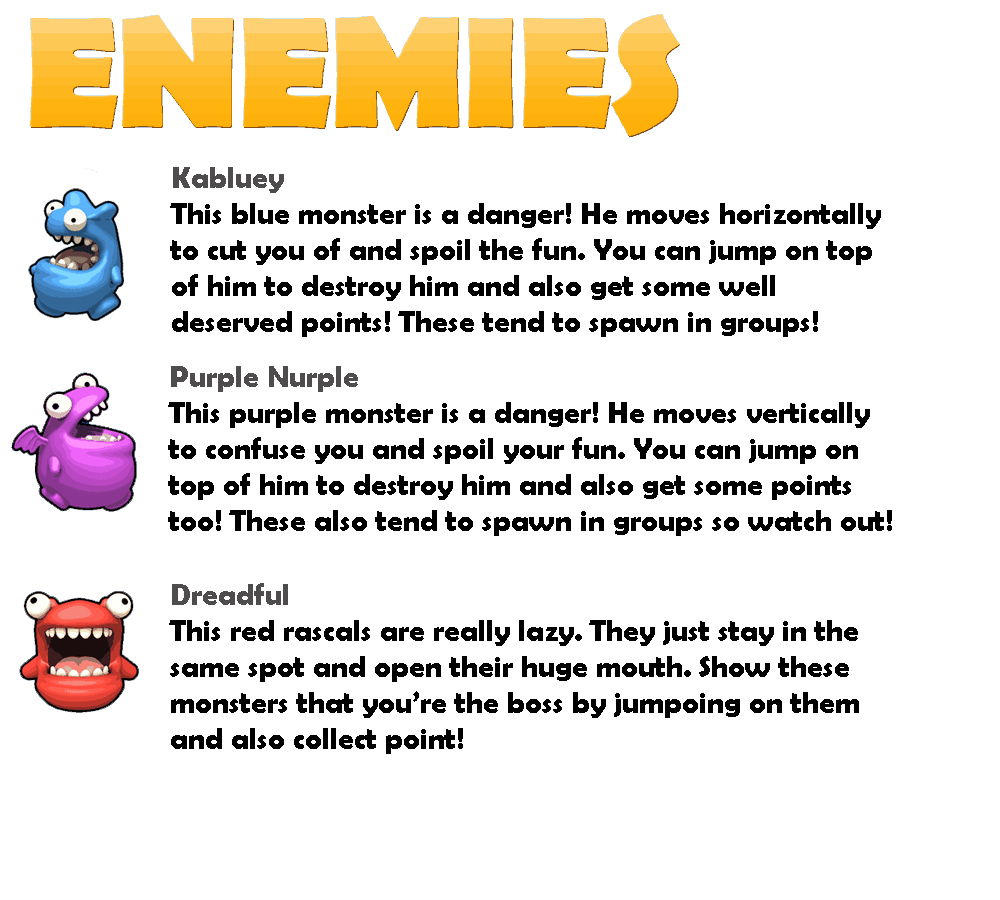
<style>
.page{position:relative;width:1000px;height:900px;background:#ffffff}
.page>*{position:absolute;margin:0}
.t1{font:30px "BerlinSansFBDemi-Bold";color:#000000}
.t2{font:30px "BerlinSansFBDemi-Bold";color:#4e4c4c}
</style>
<div class="page">
<p class="t1" style="left:170px;top:167px;width:711px;height:170px"><span class="t2">Kabluey<br></span>This blue monster is a danger! He moves horizontally to cut you of and spoil the fun. You can jump on top of him to destroy him and also get some well deserved points! These tend to spawn in groups!</p>
<p class="t1" style="left:168px;top:366px;width:724px;height:170px"><span class="t2">Purple Nurple<br></span>This purple monster is a danger! He moves vertically to confuse you and spoil your fun. You can jump on top of him to destroy him and also get some points too! These also tend to spawn in groups so watch out!</p>
<p class="t1" style="left:169px;top:583px;width:690px;height:171px"><span class="t2">Dreadful<br></span>This red rascals are really lazy. They just stay in the same spot and open their huge mouth. Show these monsters that you’re the boss by jumpoing on them and also collect point!</p>
</div>
